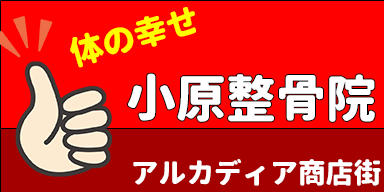
<style>
.page{position:relative;width:384px;height:192px;background:#ff0000}
.page>*{position:absolute;margin:0}
.t1{font:33.3px "GenJyuuGothic-Monospace-Heavy";color:#ffff00}
.t2{font:50px "GenJyuuGothic-Monospace-Heavy";color:#ffffff}
.t3{font:27.9px "GenJyuuGothic-Monospace-Heavy";color:#ffffff}
</style>
<div class="page">
<p class="t1" style="left:70px;top:7px;width:126px;height:61px;rotate:-16deg">体の幸せ</p>
<p class="t2" style="left:128px;top:73px;width:247px;height:49px">小原整骨院</p>
<p class="t3" style="left:133px;top:159px;width:248px;height:27px">アルカディア商店街</p>
</div>
